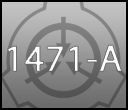
<style>
.page{position:relative;width:128px;height:110px}
.page>*{position:absolute;margin:0}
.t1{font:38px "MyriadPro-Regular";font-weight:bold}
</style>
<div class="page">
<p class="t1" style="left:7px;top:44px;width:115px;height:28px">1471-A</p>
</div>
